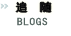
<style>
.page{position:relative;width:71px;height:36px;background:#ffffff}
.page>*{position:absolute;margin:0}
.t1{font:10.8px "SimHei";letter-spacing:0.05em;color:#000000;scale:1.03 1}
.t2{font:10.8px "SimHei";letter-spacing:0.05em;color:#566661;scale:1.05 1}
</style>
<div class="page">
<p class="t1" style="left:16px;top:2px;width:35px;height:10px">追  随</p>
<p class="t2" style="left:17px;top:17px;width:31px;height:9px">BLOGS</p>
</div>
